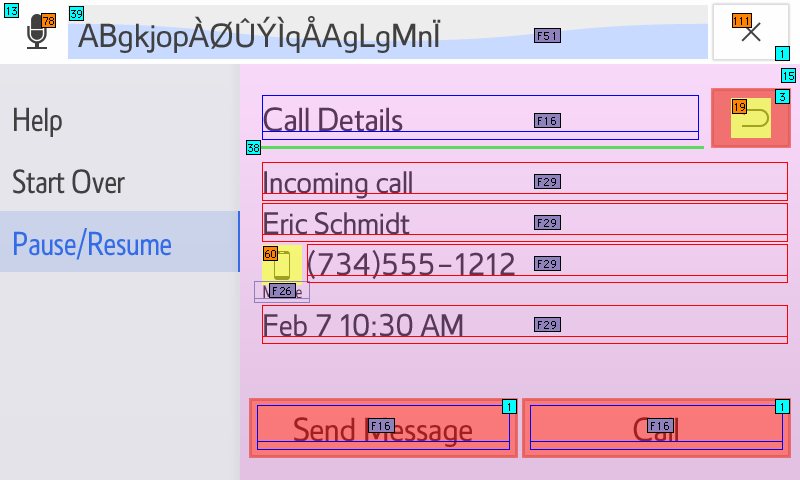
<style>
.page{position:relative;width:800px;height:480px}
.page>*{position:absolute;margin:0}
.t1{font:30px "Tfont1502_T1S";color:#404041}
.t2{font:30px "Tfont1502_T2S";color:#404041}
.t3{font:30px "Tfont1502_T1S";color:#583859}
.t4{font:28px/41px "Tfont1502_T1S";color:#583859}
.t5{font:30px "Tfont1502_T2S";color:#336ce6}
.t6{font:28px "Tfont1502_T1S";color:#583859}
.t7{font:30px "Tfont1502_T1S";color:#a02020}
</style>
<div class="page">
<p class="t1" style="left:78px;top:16px;width:363px;height:37px">ABgkjopÀØÛÝÌqÅAgLgMnÏ</p>
<p class="t2" style="left:14px;top:107px;width:48px;height:30px">Help</p>
<p class="t3" style="left:263px;top:107px;width:140px;height:25px">Call Details</p>
<p class="t2" style="left:13px;top:169px;width:112px;height:25px">Start Over</p>
<p class="t4" style="left:264px;top:171px;width:148px;height:64px">Incoming call<br>Eric Schmidt</p>
<p class="t5" style="left:14px;top:228px;width:157px;height:32px">Pause/Resume</p>
<p class="t6" style="left:308px;top:249px;width:207px;height:31px">(734)555-1212</p>
<p class="t6" style="left:264px;top:313px;width:199px;height:24px">Feb 7 10:30 AM</p>
<p class="t7" style="left:294px;top:417px;width:178px;height:30px">Send Message</p>
<p class="t7" style="left:633px;top:417px;width:45px;height:25px">Call</p>
</div>
